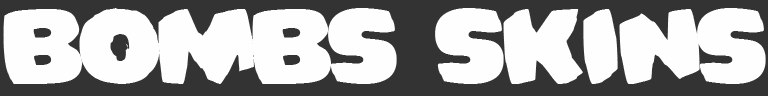
<style>
.page{position:relative;width:768px;height:96px;background:#fefefe}
.page>*{position:absolute;margin:0}
.t1{font:100px "Bomberman";color:#fefefe}
</style>
<div class="page">
<p class="t1" style="left:3px;top:8px;width:763px;height:76px">Bombs Skins</p>
</div>
